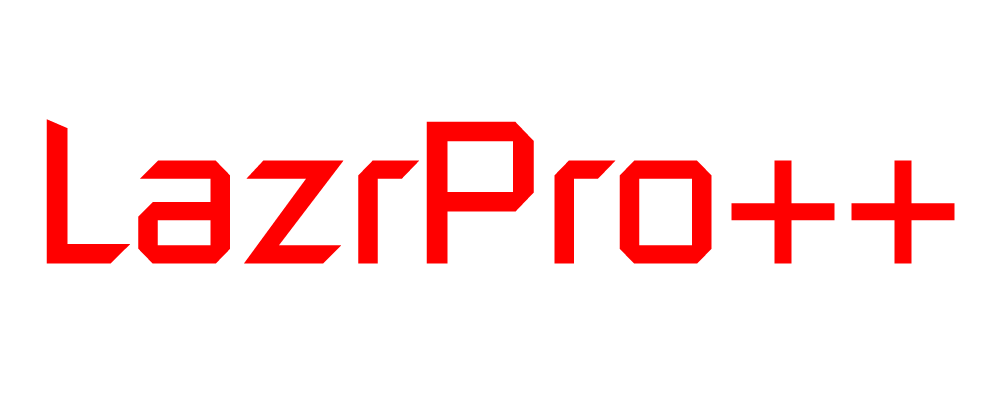
<style>
.page{position:relative;width:1000px;height:400px;background:#ffffff}
.page>*{position:absolute;margin:0}
.t1{font:200px "RussellSquare";color:#ff0000}
</style>
<div class="page">
<p class="t1" style="left:46px;top:119px;width:909px;height:145px">LazrPro++</p>
</div>
